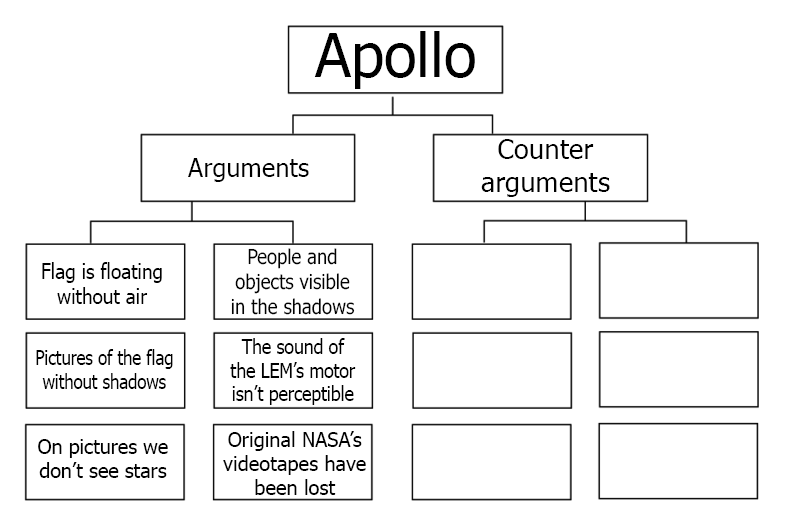
<style>
.page{position:relative;width:807px;height:518px;background:#ffffff}
.page>*{position:absolute;margin:0}
.t1{font:60px "Tahoma";color:#000000}
.t2{font:27.1px "Tahoma";color:#000000}
.t3{font:24.8px "Tahoma";color:#000000}
.t4{font:20.6px "Tahoma";color:#000000;scale:0.9 1}
.t5{font:21px "Tahoma";color:#000000;scale:0.91 1}
.t6{font:19.7px "Tahoma";color:#000000;scale:0.89 1}
.t7{font:19.8px "Tahoma";color:#000000;scale:0.84 1}
.t8{font:20.1px "Tahoma";color:#000000}
</style>
<div class="page">
<p class="t1" style="left:314px;top:31px;width:161px;height:58px">Apollo</p>
<p class="t2" style="left:481px;top:139px;width:129px;height:58px;text-align:center">Counter<br>arguments</p>
<p class="t3" style="left:188px;top:158px;width:121px;height:24px">Arguments</p>
<p class="t4" style="left:231px;top:248px;width:124px;height:67px;text-align:center">People and<br>objects visible<br>in the shadows</p>
<p class="t5" style="left:42px;top:262px;width:120px;height:42px;text-align:center">Flag is floating<br>without air</p>
<p class="t6" style="left:230px;top:338px;width:126px;height:67px;text-align:center">The sound of<br>the LEM’s motor<br>isn’t perceptible</p>
<p class="t7" style="left:36px;top:349px;width:137px;height:40px;text-align:center">Pictures of the flag<br>without shadows</p>
<p class="t8" style="left:223px;top:431px;width:143px;height:64px;text-align:center">Original NASA’s<br>videotapes have<br>been lost</p>
<p class="t8" style="left:38px;top:439px;width:130px;height:39px;text-align:center">On pictures we<br>don’t see stars</p>
</div>
